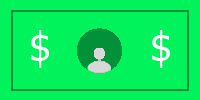
<style>
.page{position:relative;width:200px;height:100px;background:#00f35b}
.page>*{position:absolute;margin:0}
.t1{font:40px "Tahoma";color:#ffffff}
</style>
<div class="page">
<p class="t1" style="left:31px;top:30px;width:18px;height:38px">$</p>
</div>
